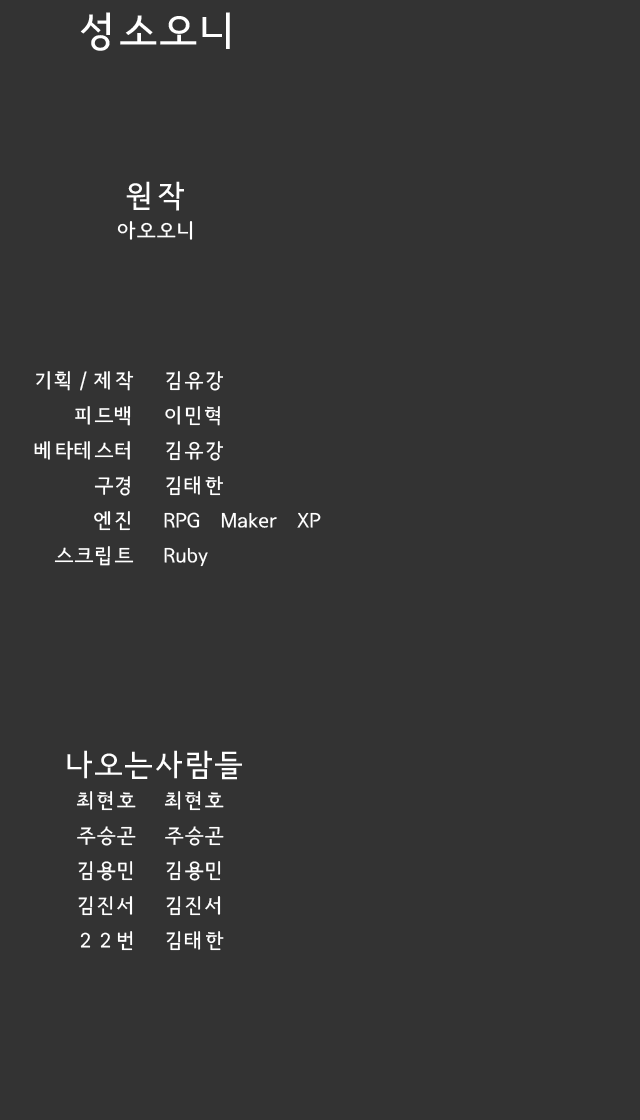
<style>
.page{position:relative;width:640px;height:1120px;background:#333333}
.page>*{position:absolute;margin:0}
.t1{font:40px "SeoulNamsanvert";color:#ffffff}
.t2{font:30px "SeoulNamsanvert";color:#ffffff}
.t3{font:20px "SeoulNamsanvert";color:#ffffff}
</style>
<div class="page">
<p class="t1" style="left:80px;top:12px;width:150px;height:39px">성소오니</p>
<p class="t2" style="left:126px;top:181px;width:58px;height:30px">원작</p>
<p class="t3" style="left:117px;top:221px;width:76px;height:19px">아오오니</p>
<p class="t3" style="left:34px;top:371px;width:100px;height:195px;text-align:right">기획/제작<br>피드백<br>베타테스터<br>구경<br>엔진<br>스크립트</p>
<p class="t3" style="left:164px;top:371px;width:157px;height:196px">김유강<br>이민혁<br>김유강<br>김태한<br>RPG Maker XP<br>Ruby</p>
<p class="t2" style="left:67px;top:750px;width:175px;height:30px">나오는사람들</p>
<p class="t3" style="left:76px;top:791px;width:60px;height:160px;text-align:right">최현호<br>주승곤<br>김용민<br>김진서<br>22번</p>
<p class="t3" style="left:164px;top:791px;width:60px;height:160px">최현호<br>주승곤<br>김용민<br>김진서<br>김태한</p>
</div>
